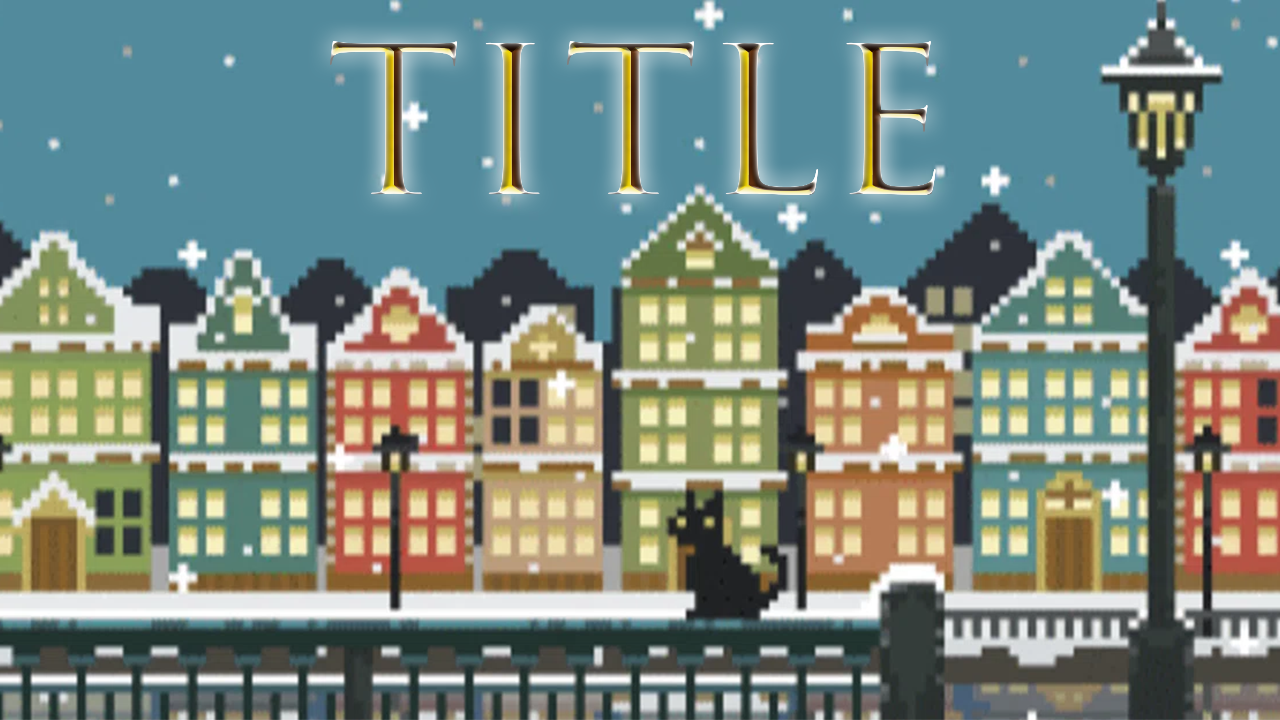
<style>
.page{position:relative;width:1280px;height:720px;background:#528a9c}
.page>*{position:absolute;margin:0}
.t1{font:200px "TrajanColor-Concept";font-weight:bold}
</style>
<div class="page">
<p class="t1" style="left:330px;top:41px;width:606px;height:154px">TITLE</p>
</div>
